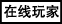
<style>
.page{position:relative;width:62px;height:24px;background:#ffffff}
.page>*{position:absolute;margin:0}
.t1{font:14px "AdobeHeitiStd-Regular";color:#000000}
</style>
<div class="page">
<p class="t1" style="left:4px;top:4px;width:55px;height:14px">在线玩家</p>
</div>
